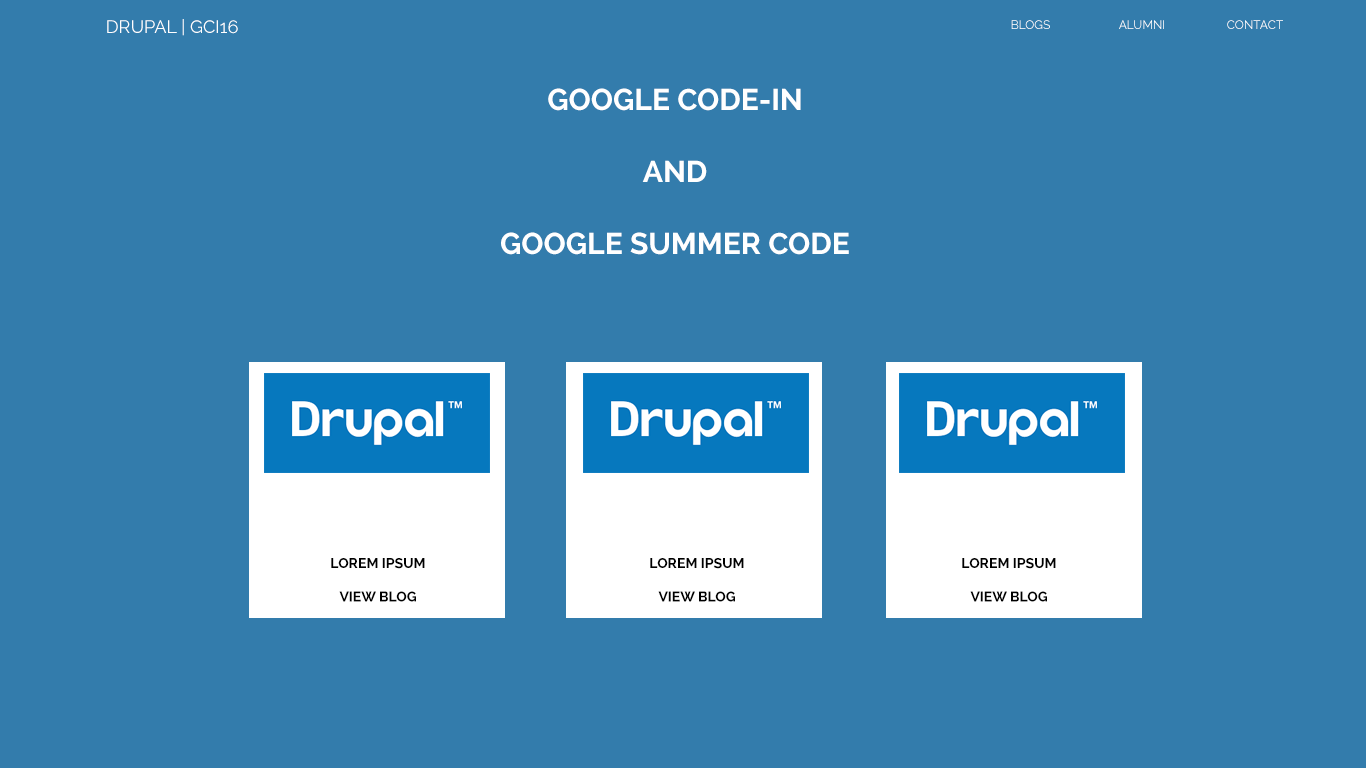
<style>
.page{position:relative;width:1366px;height:768px;background:#337cac}
.page>*{position:absolute;margin:0}
.t1{font:18px "Raleway-Regular";color:#ffffff}
.t2{font:12px "Raleway-Regular";color:#ffffff}
.t3{font:30px "Raleway-Bold";color:#ffffff}
.t4{font:14px "Raleway-Bold";color:#000000}
</style>
<div class="page">
<p class="t1" style="left:107px;top:19px;width:131px;height:17px">DRUPAL | GCI16</p>
<p class="t2" style="left:1011px;top:20px;width:272px;height:9px">BLOGS  ALUMNI  CONTACT</p>
<p class="t3" style="left:501px;top:88px;width:348px;height:167px;text-align:center">GOOGLE CODE-IN<br><br>AND<br><br>GOOGLE SUMMER CODE</p>
<p class="t4" style="left:331px;top:558px;width:94px;height:44px;text-align:center">LOREM IPSUM<br><br>VIEW BLOG</p>
<p class="t4" style="left:650px;top:558px;width:94px;height:44px;text-align:center">LOREM IPSUM<br><br>VIEW BLOG</p>
<p class="t4" style="left:962px;top:558px;width:94px;height:44px;text-align:center">LOREM IPSUM<br><br>VIEW BLOG</p>
</div>
